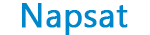
<style>
.page{position:relative;width:150px;height:35px;background:#ffffff}
.page>*{position:absolute;margin:0}
.t1{font:33.3px "Gadugi";color:#0086cb;font-weight:bold}
</style>
<div class="page">
<p class="t1" style="left:22px;top:3px;width:106px;height:33px">Napsat</p>
</div>
